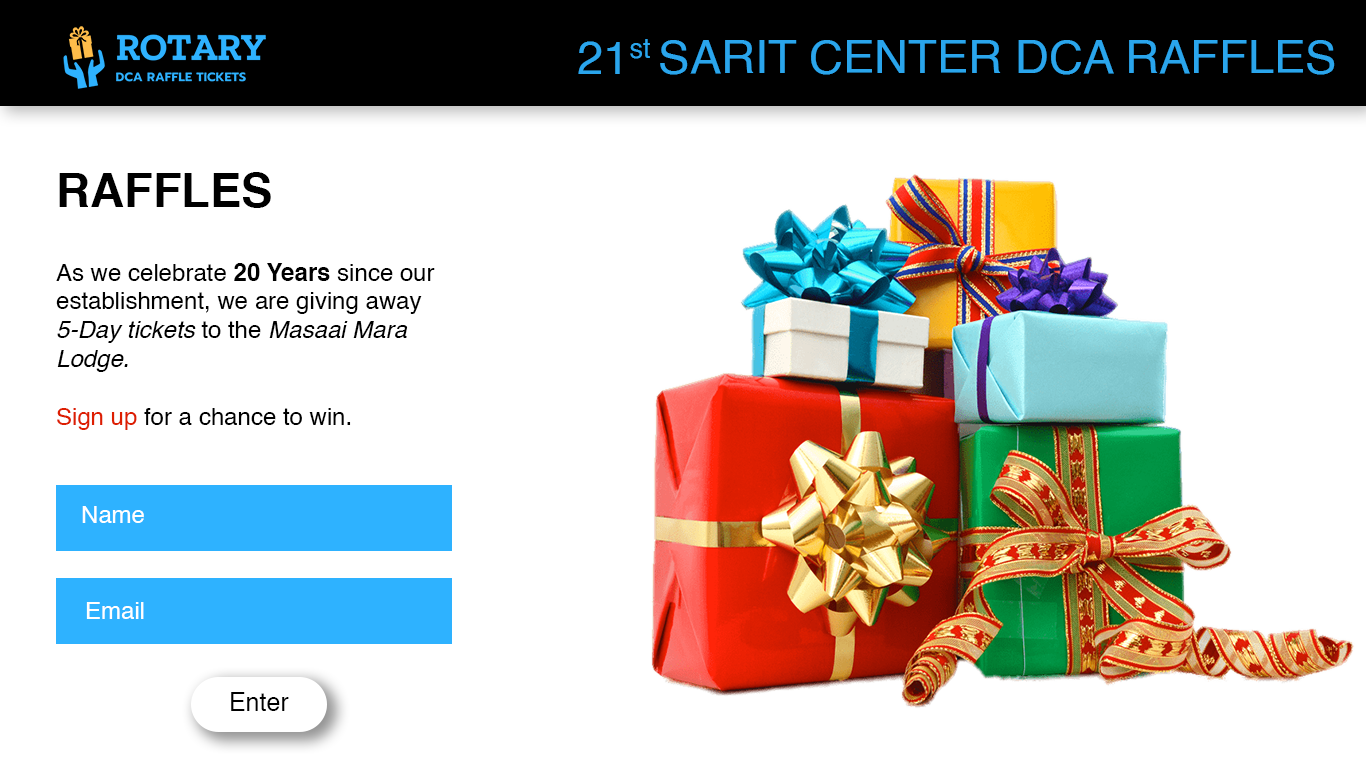
<style>
.page{position:relative;width:1366px;height:768px;background:#ffffff}
.page>*{position:absolute;margin:0}
.t1{font:47px "Helvetica";color:#2aa5ec;text-transform:uppercase}
.t2{font:47px "Helvetica";color:#2aa5ec}
.t3{font:47px "Helvetica-Bold";color:#000000}
.t4{font:24px "Helvetica";color:#000000}
.t5{font:24px "Helvetica-Bold";color:#000000}
.t6{font:24px "Helvetica-Oblique";color:#000000}
.t7{font:24px "Helvetica";color:#dd1e01}
.t8{font:24px "Helvetica";color:#ffffff}
.t9{font:25px "Helvetica";color:#000000}
</style>
<div class="page">
<p class="t1" style="left:578px;top:39px;width:757px;height:36px">21<span class="t2">st </span>Sarit Center DCA RAFFLES</p>
<p class="t3" style="left:59px;top:172px;width:212px;height:36px">RAFFLES</p>
<p class="t4" style="left:56px;top:263px;width:379px;height:167px">As we celebrate <span class="t5">20 Years</span> since our establishment, we are giving away <span class="t6">5-Day tickets </span>to the <span class="t6">Masaai Mara Lodge. <br><br></span><span class="t7">Sign up</span> for a chance to win.</p>
<p class="t8" style="left:82px;top:506px;width:62px;height:17px">Name</p>
<p class="t8" style="left:86px;top:602px;width:58px;height:17px">Email</p>
<p class="t9" style="left:231px;top:692px;width:58px;height:19px">Enter</p>
</div>
